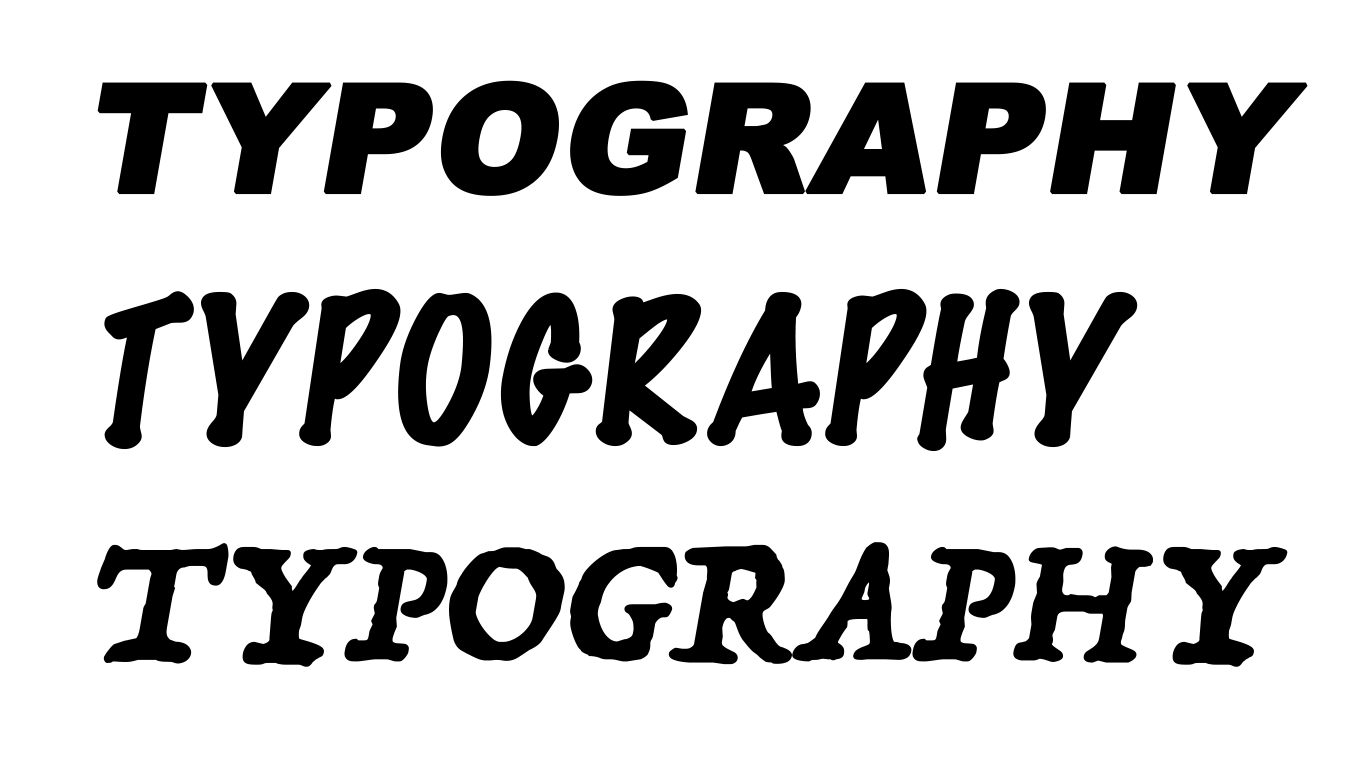
<style>
.page{position:relative;width:1366px;height:768px;background:#ffffff}
.page>*{position:absolute;margin:0}
.t1{font:150px "Arial-Black";color:#000000;font-weight:bold;font-style:italic}
.t2{font:178.5px "MarkerFelt-Thin";color:#000000;font-weight:bold;font-style:italic}
.t3{font:191.2px "Trattatello";color:#000000;font-weight:bold;font-style:italic}
</style>
<div class="page">
<p class="t1" style="left:97px;top:80px;width:1211px;height:116px">TYPOGRAPHY</p>
<p class="t2" style="left:104px;top:288px;width:1034px;height:164px">TYPOGRAPHY</p>
<p class="t3" style="left:97px;top:542px;width:1191px;height:125px">TYPOGRAPHY</p>
</div>
